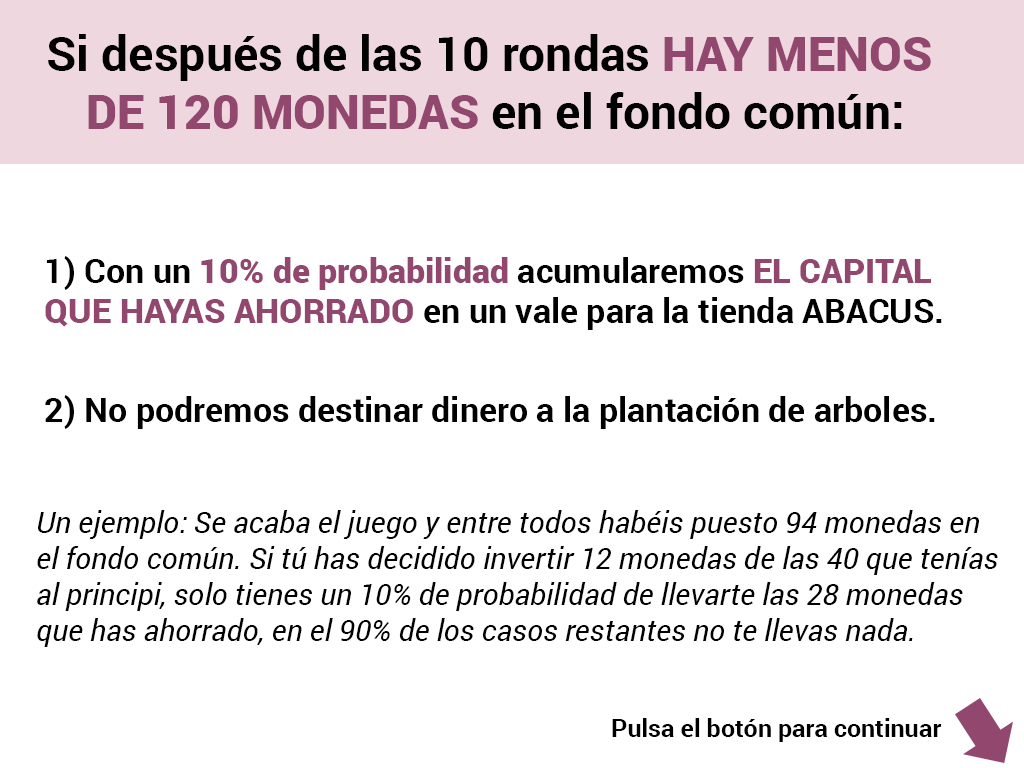
<style>
.page{position:relative;width:1024px;height:768px;background:#ffffff}
.page>*{position:absolute;margin:0}
.t1{font:48px "Roboto-Bold";color:#000000}
.t2{font:48px "Roboto-Black";color:#92476e}
.t3{font:34px "Roboto-Bold";color:#000000}
.t4{font:34px "Roboto-Black";color:#92476e}
.t5{font:30px "Roboto-Italic";color:#000000}
.t6{font:25px "Roboto-Bold";color:#000000}
</style>
<div class="page">
<p class="t1" style="left:48px;top:34px;width:883px;height:95px;text-align:center">Si después de las 10 rondas <span class="t2">HAY MENOS <br>DE 120 MONEDAS </span>en el fondo común:</p>
<p class="t3" style="left:45px;top:256px;width:897px;height:173px">1) Con un <span class="t4">10% de probabilidad </span>acumularemos <span class="t4">EL CAPITAL <br>QUE HAYAS AHORRADO </span>en un vale para la tienda ABACUS.<br><br><br>2) No podremos destinar dinero a la plantación de arboles.</p>
<p class="t5" style="left:37px;top:510px;width:961px;height:137px">Un ejemplo: Se acaba el juego y entre todos habéis puesto 94 monedas en<br>el fondo común. Si tú has decidido invertir 12 monedas de las 40 que tenías<br>al principi, solo tienes un 10% de probabilidad de llevarte las 28 monedas <br>que has ahorrado, en el 90% de los casos restantes no te llevas nada.</p>
<p class="t6" style="left:612px;top:718px;width:330px;height:24px">Pulsa el botón para continuar</p>
</div>
